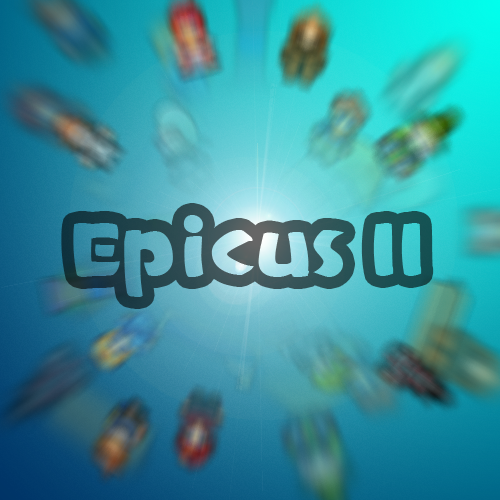
<style>
.page{position:relative;width:500px;height:500px}
.page>*{position:absolute;margin:0}
.t1{font:84px "CasualMarkerMF"}
</style>
<div class="page">
<p class="t1" style="left:73px;top:215px;width:349px;height:82px">Epicus II</p>
</div>
